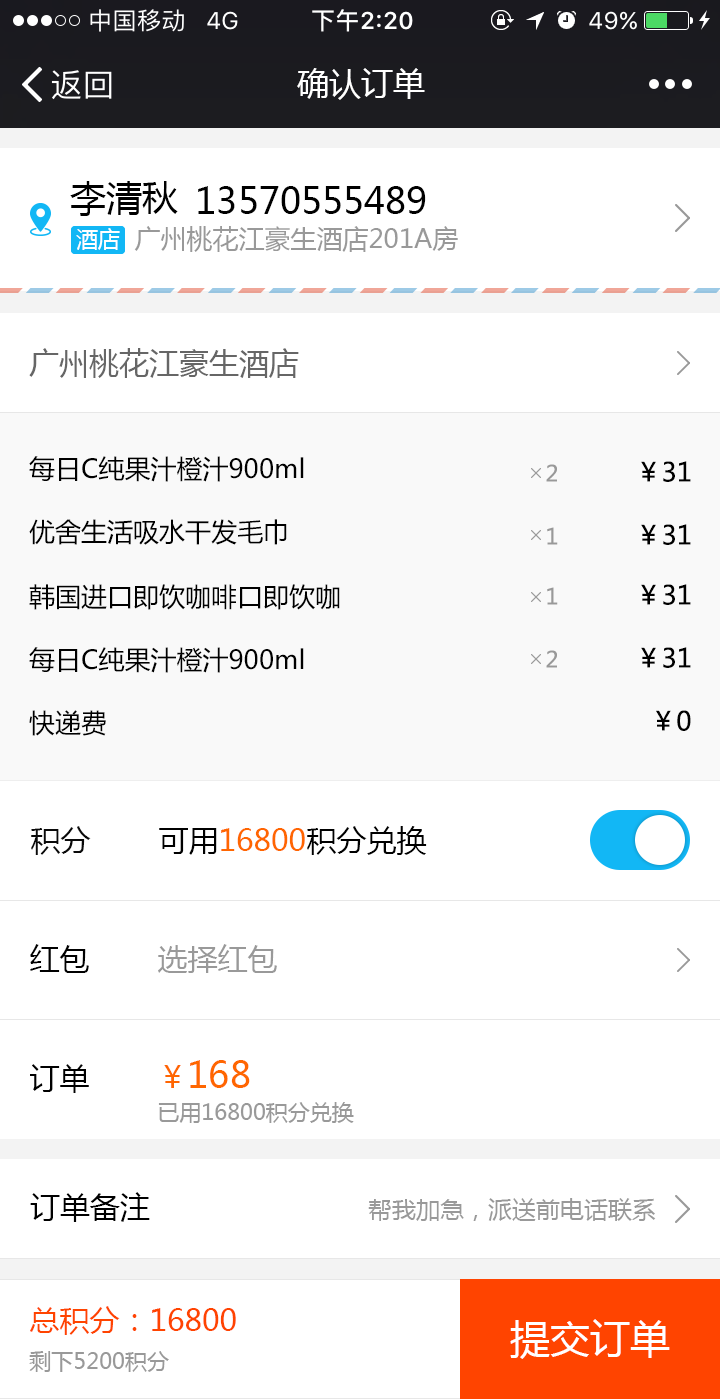
<style>
.page{position:relative;width:720px;height:1399px;background:#ffffff}
.page>*{position:absolute;margin:0}
.t1{font:32px "MicrosoftYaHei";color:#ffffff}
.t2{font:36px "MicrosoftYaHei";color:#000000}
.t3{font:22px "MicrosoftYaHei";color:#ffffff}
.t4{font:26px "MicrosoftYaHei";color:#999999}
.t5{font:30px "MicrosoftYaHei";color:#666666}
.t6{font:26px "MicrosoftYaHei";color:#000000}
.t7{font:22px "MicrosoftYaHei";color:#999999}
.t8{font:30px "MicrosoftYaHei";color:#0a0a0a}
.t9{font:30px "MicrosoftYaHei";color:#ff6600}
.t10{font:30px "MicrosoftYaHei";color:#000000}
.t11{font:30px "MicrosoftYaHei";color:#999999}
.t12{font:22px/44px "MicrosoftYaHei";color:#999999}
.t13{font:30px/44px "MicrosoftYaHei";color:#ff6600}
.t14{font:36px/44px "MicrosoftYaHei";color:#ff6600}
.t15{font:24px "MicrosoftYaHei";color:#999999}
.t16{font:30px/45px "MicrosoftYaHei";color:#ff4400}
.t17{font:22px/45px "MicrosoftYaHei";color:#999999}
.t18{font:40px "MicrosoftYaHei";color:#ffffff}
</style>
<div class="page">
<p class="t1" style="left:297px;top:68px;width:128px;height:32px">确认订单</p>
<p class="t2" style="left:70px;top:181px;width:108px;height:35px">李清秋</p>
<p class="t2" style="left:198px;top:186px;width:228px;height:28px">13570555489</p>
<p class="t3" style="left:76px;top:228px;width:44px;height:22px">酒店</p>
<p class="t4" style="left:134px;top:226px;width:324px;height:26px">广州桃花江豪生酒店201A房</p>
<p class="t5" style="left:29px;top:348px;width:270px;height:30px">广州桃花江豪生酒店</p>
<p class="t6" style="left:29px;top:456px;width:275px;height:26px">每日C纯果汁橙汁900ml</p>
<p class="t6" style="left:641px;top:461px;width:50px;height:21px">￥31</p>
<p class="t7" style="left:546px;top:464px;width:11px;height:18px">2</p>
<p class="t6" style="left:29px;top:519px;width:258px;height:26px">优舍生活吸水干发毛巾</p>
<p class="t7" style="left:547px;top:527px;width:11px;height:18px">1</p>
<p class="t6" style="left:641px;top:524px;width:50px;height:21px">￥31</p>
<p class="t6" style="left:29px;top:584px;width:311px;height:26px">韩国进口即饮咖啡口即饮咖</p>
<p class="t7" style="left:547px;top:587px;width:11px;height:18px">1</p>
<p class="t6" style="left:641px;top:584px;width:50px;height:21px">￥31</p>
<p class="t6" style="left:29px;top:647px;width:275px;height:26px">每日C纯果汁橙汁900ml</p>
<p class="t7" style="left:546px;top:650px;width:11px;height:18px">2</p>
<p class="t6" style="left:641px;top:647px;width:50px;height:21px">￥31</p>
<p class="t6" style="left:29px;top:710px;width:77px;height:26px">快递费</p>
<p class="t6" style="left:656px;top:710px;width:35px;height:21px">￥0</p>
<p class="t8" style="left:31px;top:826px;width:60px;height:29px">积分</p>
<p class="t9" style="left:159px;top:826px;width:268px;height:29px"><span class="t10">可用</span>16800<span class="t10">积分兑换</span></p>
<p class="t10" style="left:30px;top:944px;width:59px;height:29px">红包</p>
<p class="t11" style="left:158px;top:944px;width:119px;height:29px">选择红包</p>
<p class="t12" style="left:158px;top:1060px;width:196px;height:63px"><span class="t13">￥</span><span class="t14">168<br></span>已用16800积分兑换</p>
<p class="t10" style="left:30px;top:1064px;width:59px;height:29px">订单</p>
<p class="t10" style="left:30px;top:1192px;width:120px;height:30px">订单备注</p>
<p class="t15" style="left:368px;top:1198px;width:288px;height:23px">帮我加急，派送前电话联系</p>
<p class="t16" style="left:29px;top:1306px;width:207px;height:66px">总积分：16800<br><span class="t17">剩下5200积分</span></p>
<p class="t18" style="left:510px;top:1319px;width:160px;height:40px">提交订单</p>
</div>
